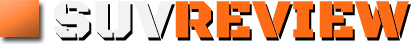
<style>
.page{position:relative;width:412px;height:44px;background:#ffffff}
.page>*{position:absolute;margin:0}
.t1{font:55px "BlackOpsOne-Regular";color:#fd6c14;text-transform:uppercase;font-weight:bold}
.t2{font:55px "BlackOpsOne-Regular";color:#f2f2f2;text-transform:uppercase;font-weight:bold}
</style>
<div class="page">
<p class="t1" style="left:54px;top:1px;width:355px;height:37px"><span class="t2">Suv</span>Review</p>
</div>
